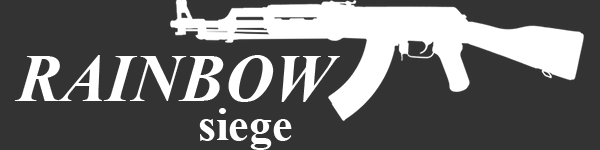
<style>
.page{position:relative;width:600px;height:150px;background:#333333}
.page>*{position:absolute;margin:0}
.t1{font:66.7px "TimesNewRomanPS-BoldItalicMT";color:#ffffff}
.t2{font:45.8px "TimesNewRomanPS-BoldMT";color:#ffffff}
</style>
<div class="page">
<p class="t1" style="left:14px;top:55px;width:326px;height:47px">RAINBOW</p>
<p class="t2" style="left:199px;top:108px;width:93px;height:42px">siege</p>
</div>
